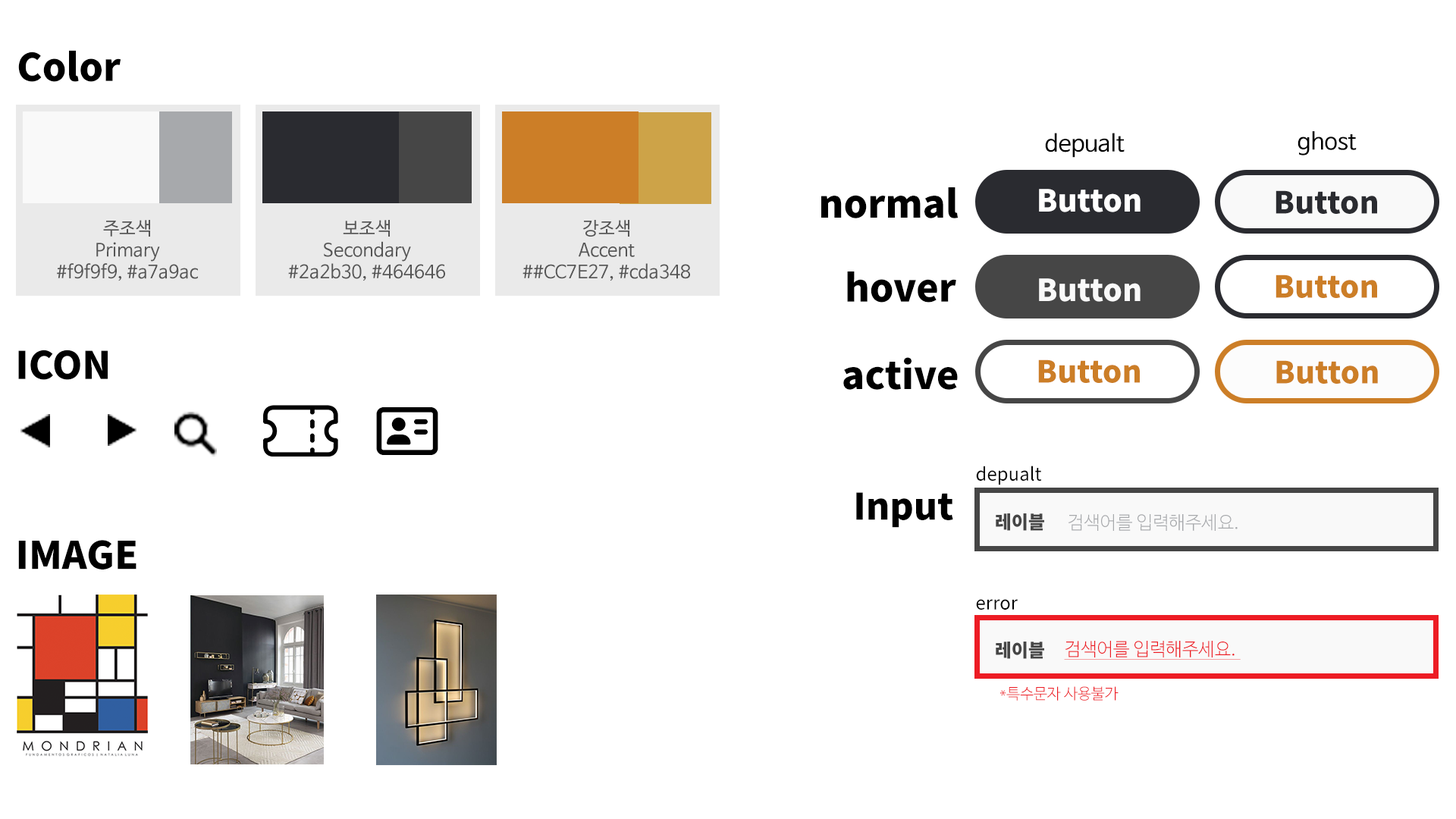
<style>
.page{position:relative;width:1456px;height:819px;background:#ffffff}
.page>*{position:absolute;margin:0}
.t1{font:37.9px "NotoSansKR-Black";color:#000000}
.t2{font:22.7px "NanumBarunGothic";color:#000000}
.t3{font:30.3px "NotoSansKR-Black";color:#ffffff}
.t4{font:30.3px "NotoSansKR-Black";color:#2a2b30}
.t5{font:18.2px "NanumBarunGothic";color:#555555}
.t6{font:30.3px "NotoSansKR-Black";color:#f9f9f9}
.t7{font:30.3px "NotoSansKR-Black";color:#cc7e27}
.t8{font:18.2px "NotoSansKR-Regular";color:#000000}
.t9{font:36.4px "NotoSansKR-Black";color:#000000}
.t10{font:18.2px "NotoSansKR-Black";color:#464646}
.t11{font:18.2px "NanumBarunGothicLight";color:#a7a9ac}
.t12{font:18.2px "NanumBarunGothicLight";color:#ed1c24;text-decoration:underline}
.t13{font:15.2px "NanumBarunGothicLight";color:#ed1c24}
</style>
<div class="page">
<p class="t1" style="left:18px;top:50px;width:103px;height:32px">Color</p>
<p class="t2" style="left:1045px;top:133px;width:80px;height:25px">depualt</p>
<p class="t2" style="left:1297px;top:131px;width:60px;height:24px">ghost</p>
<p class="t1" style="left:821px;top:187px;width:137px;height:31px">normal</p>
<p class="t3" style="left:1039px;top:189px;width:102px;height:23px">Button</p>
<p class="t4" style="left:1275px;top:190px;width:102px;height:24px">Button</p>
<p class="t5" style="left:57px;top:220px;width:141px;height:61px;text-align:center">주조색<br>Primary<br>#f9f9f9, #a7a9ac</p>
<p class="t5" style="left:288px;top:220px;width:157px;height:61px;text-align:center">보조색<br>Secondary<br>#2a2b30, #464646</p>
<p class="t5" style="left:522px;top:220px;width:168px;height:61px;text-align:center">강조색<br>Accent<br>##CC7E27, #cda348</p>
<p class="t1" style="left:847px;top:271px;width:109px;height:32px">hover</p>
<p class="t6" style="left:1039px;top:278px;width:102px;height:24px">Button</p>
<p class="t7" style="left:1275px;top:275px;width:102px;height:23px">Button</p>
<p class="t1" style="left:18px;top:350px;width:90px;height:30px">ICON</p>
<p class="t1" style="left:843px;top:357px;width:115px;height:33px">active</p>
<p class="t7" style="left:1038px;top:359px;width:102px;height:24px">Button</p>
<p class="t7" style="left:1276px;top:360px;width:102px;height:24px">Button</p>
<p class="t8" style="left:976px;top:466px;width:66px;height:19px">depualt</p>
<p class="t9" style="left:856px;top:492px;width:97px;height:36px">Input</p>
<p class="t10" style="left:996px;top:513px;width:48px;height:18px">레이블</p>
<p class="t11" style="left:1068px;top:514px;width:170px;height:17px">검색어를 입력해주세요.</p>
<p class="t1" style="left:18px;top:540px;width:118px;height:30px">IMAGE</p>
<p class="t8" style="left:976px;top:599px;width:42px;height:11px">error</p>
<p class="t10" style="left:996px;top:642px;width:48px;height:17px">레이블</p>
<p class="t12" style="left:1064px;top:641px;width:177px;height:19px">검색어를 입력해주세요.</p>
<p class="t13" style="left:1000px;top:686px;width:119px;height:15px">*특수문자 사용불가</p>
</div>
